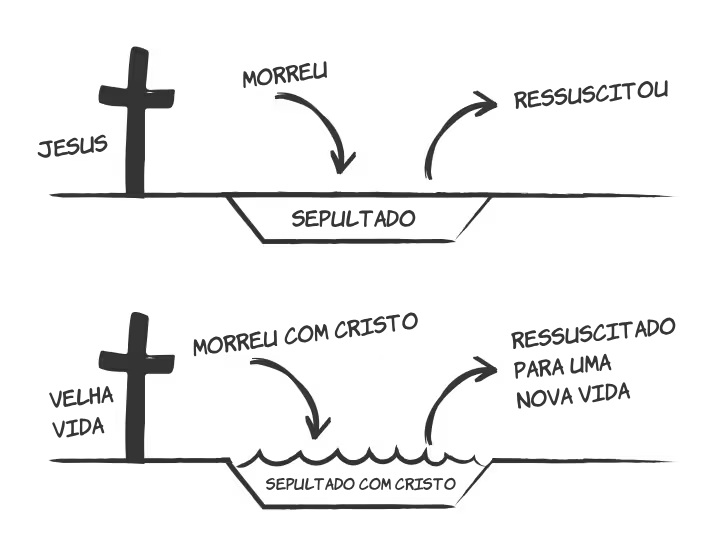
<style>
.page{position:relative;width:708px;height:555px;background:#ffffff}
.page>*{position:absolute;margin:0}
.t1{font:21px "KomikaHand";color:#363636}
.t2{font:21px/30px "KomikaHand";color:#363636}
.t3{font:15px "KomikaHand";color:#363636}
</style>
<div class="page">
<p class="t1" style="left:243px;top:61px;width:85px;height:28px;rotate:-7deg">MorreU</p>
<p class="t1" style="left:514px;top:80px;width:154px;height:30px;rotate:-5deg">Ressuscitou</p>
<p class="t1" style="left:37px;top:134px;width:71px;height:24px;rotate:-6deg">JESUS</p>
<p class="t1" style="left:292px;top:210px;width:124px;height:18px">Sepultado</p>
<p class="t1" style="left:193px;top:312px;width:225px;height:45px;rotate:-7deg">Morreu com Cristo</p>
<p class="t2" style="left:511px;top:317px;width:165px;height:92px;rotate:-5deg">Ressuscitado<br>para uma<br>nova vida</p>
<p class="t2" style="left:49px;top:385px;width:65px;height:53px;rotate:-6deg">Velha<br>vida</p>
<p class="t3" style="left:266px;top:477px;width:190px;height:14px">Sepultado com Cristo</p>
</div>
